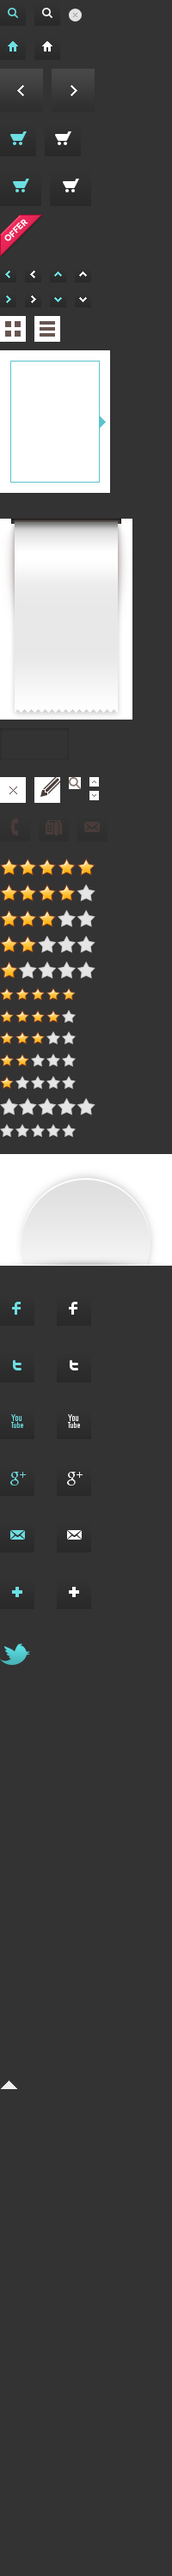
<style>
.page{position:relative;width:172px;height:2576px;background:#333333}
.page>*{position:absolute;margin:0}
.t1{font:8.6px "Novecentowide-DemiBold";color:#ffffff}
</style>
<div class="page">
<p class="t1" style="left:4px;top:219px;width:24px;height:22px;rotate:-45deg">offer</p>
</div>
